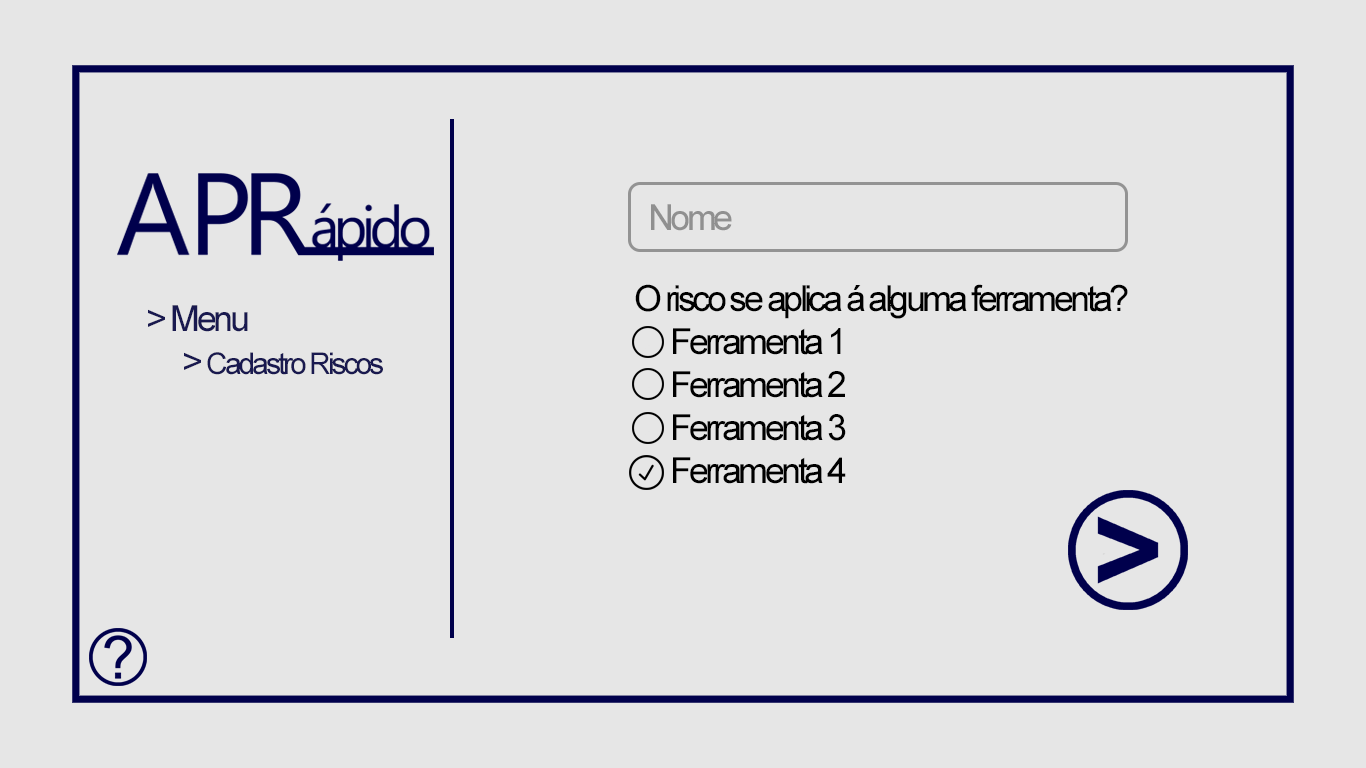
<style>
.page{position:relative;width:1366px;height:768px;background:#e6e6e6}
.page>*{position:absolute;margin:0}
.t1{font:36px "ArialMT";letter-spacing:-0.1em;color:#909090}
.t2{font:36px "ArialMT";letter-spacing:-0.1em;color:#000000}
.t3{font:30px "ArialMT";letter-spacing:-0.1em;color:#19194f}
.t4{font:36px "ArialMT";letter-spacing:-0.095em;color:#19194f}
</style>
<div class="page">
<p class="t1" style="left:651px;top:204px;width:81px;height:27px">Nome</p>
<p class="t2" style="left:635px;top:284px;width:493px;height:200px">O risco se aplica á alguma ferramenta?<br> Ferramenta 1<br> Ferramenta 2<br> Ferramenta 3<br> Ferramenta 4</p>
<p class="t3" style="left:148px;top:305px;width:235px;height:70px"><span class="t4">&gt; Menu<br> &gt; </span>Cadastro Riscos</p>
</div>
